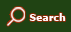
<style>
.page{position:relative;width:71px;height:32px;background:#204313}
.page>*{position:absolute;margin:0}
.t1{font:9.8px "Verdana-Bold";color:#fefffd;scale:0.97 1}
</style>
<div class="page">
<p class="t1" style="left:29px;top:13px;width:37px;height:8px">Search</p>
</div>
